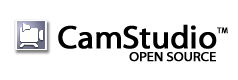
<style>
.page{position:relative;width:238px;height:80px;background:#ffffff}
.page>*{position:absolute;margin:0}
.t1{font:32.4px "MyriadWebPro";letter-spacing:-0.01em;color:#000000;font-weight:bold}
.t2{font:8.1px "MyriadWebPro";letter-spacing:-0.01em;color:#000000;font-weight:bold}
.t3{font:13.5px "MyriadWebPro";letter-spacing:-0.01em;color:#000000;font-weight:bold}
</style>
<div class="page">
<p class="t1" style="left:58px;top:24px;width:159px;height:25px">CamStudio</p>
<p class="t2" style="left:217px;top:27px;width:11px;height:7px">TM</p>
<p class="t3" style="left:129px;top:52px;width:87px;height:10px">OPEN SOURCE</p>
</div>
